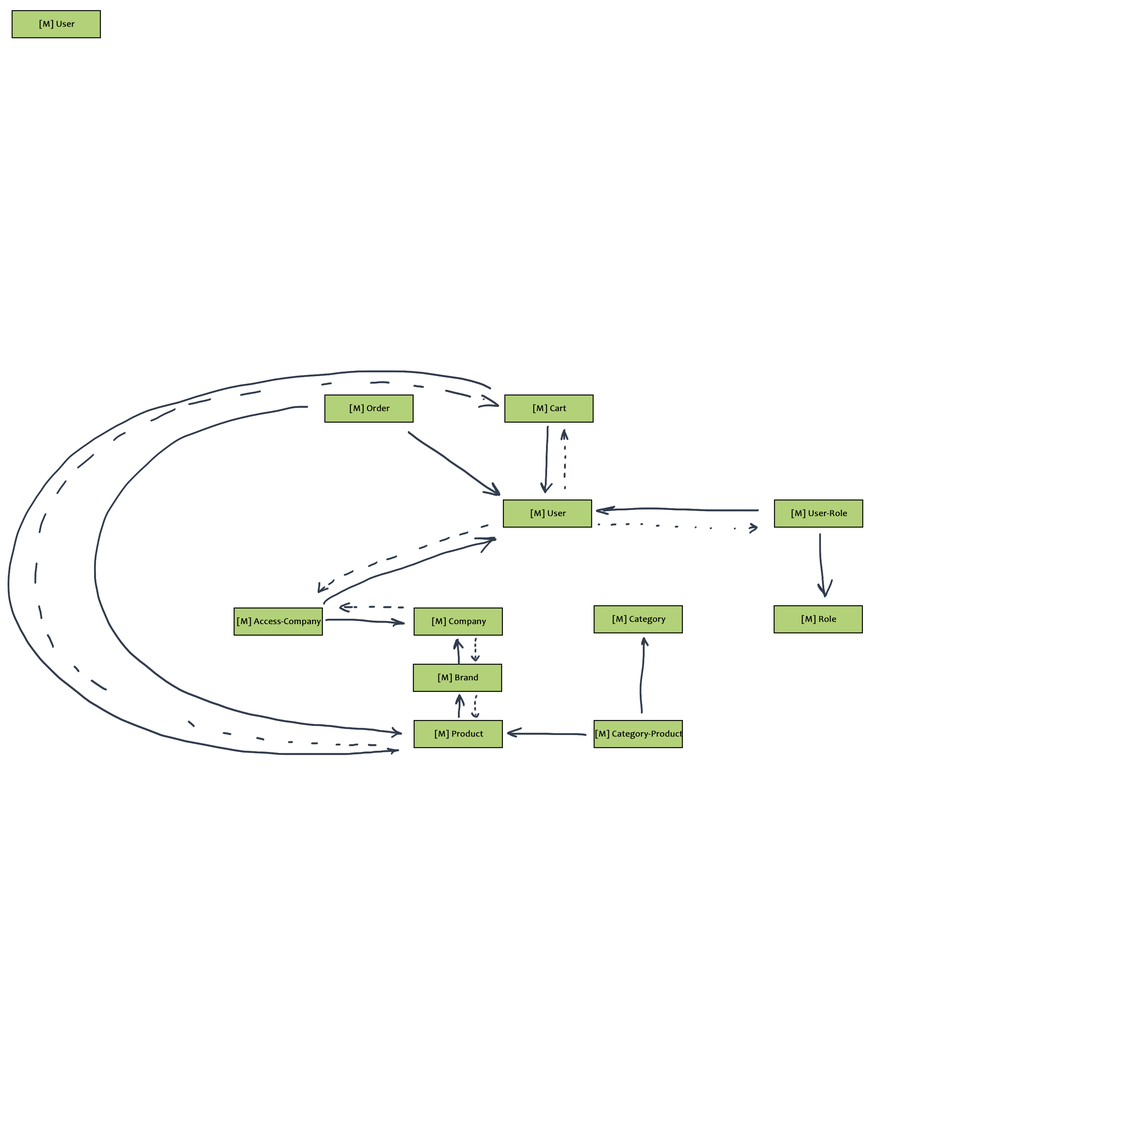
<style>
.page{position:relative;width:1125px;height:1125px;background:#ffffff}
.page>*{position:absolute;margin:0}
.t1{font:9px "Candara";color:#000000;font-weight:bold}
</style>
<div class="page">
<p class="t1" style="left:39px;top:20px;width:36px;height:9px">[M] User</p>
<p class="t1" style="left:350px;top:404px;width:40px;height:9px">[M] Order</p>
<p class="t1" style="left:533px;top:404px;width:33px;height:9px">[M] Cart</p>
<p class="t1" style="left:531px;top:509px;width:35px;height:9px">[M] User</p>
<p class="t1" style="left:791px;top:509px;width:56px;height:9px">[M] User-Role</p>
<p class="t1" style="left:237px;top:617px;width:84px;height:9px">[M] Access-Company</p>
<p class="t1" style="left:432px;top:617px;width:54px;height:9px">[M] Company</p>
<p class="t1" style="left:612px;top:615px;width:54px;height:9px">[M] Category</p>
<p class="t1" style="left:801px;top:615px;width:35px;height:9px">[M] Role</p>
<p class="t1" style="left:438px;top:674px;width:40px;height:8px">[M] Brand</p>
<p class="t1" style="left:435px;top:730px;width:48px;height:9px">[M] Product</p>
<p class="t1" style="left:595px;top:730px;width:88px;height:9px">[M] Category-Product</p>
</div>
